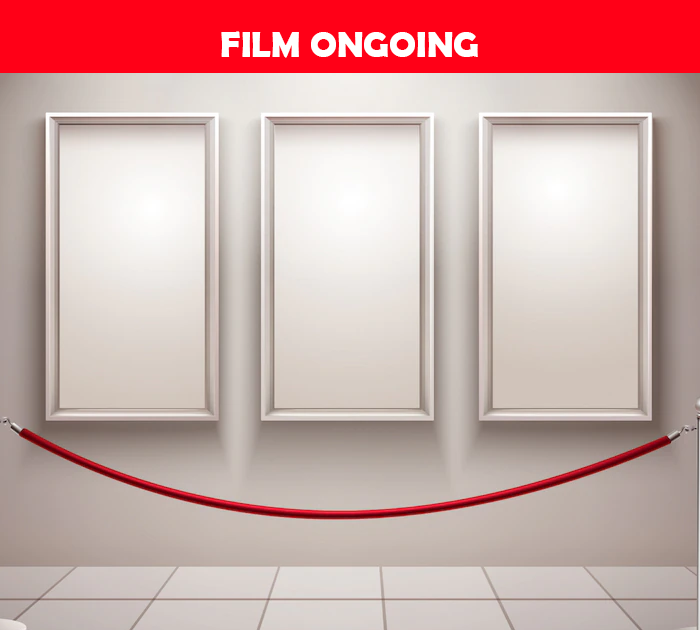
<style>
.page{position:relative;width:700px;height:630px}
.page>*{position:absolute;margin:0}
.t1{font:36px "BerlinSansFBDemi-Bold";color:#ffffff}
</style>
<div class="page">
<p class="t1" style="left:221px;top:31px;width:257px;height:27px">FILM ONGOING</p>
</div>
